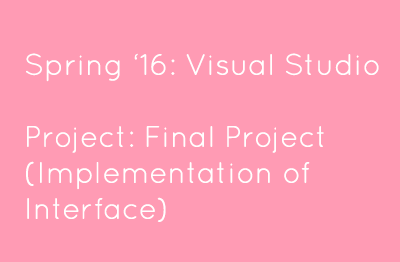
<style>
.page{position:relative;width:400px;height:262px;background:#ff9bb4}
.page>*{position:absolute;margin:0}
.t1{font:30px "Quicksand-Regular";color:#ffffff}
</style>
<div class="page">
<p class="t1" style="left:26px;top:53px;width:353px;height:169px">Spring ‘16: Visual Studio<br><br>Project: Final Project<br>(Implementation of <br>Interface)</p>
</div>
